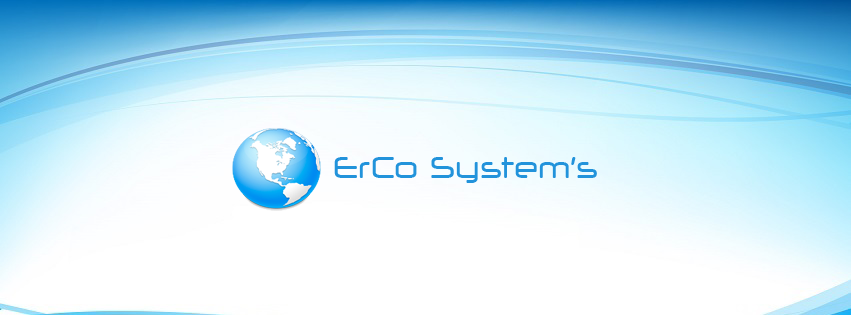
<style>
.page{position:relative;width:851px;height:315px;background:#ffffff}
.page>*{position:absolute;margin:0}
.t1{font:32px "NeuropolXRg-Regular";color:#2293db}
</style>
<div class="page">
<p class="t1" style="left:334px;top:157px;width:263px;height:26px">ErCo System’s</p>
</div>
